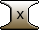
<style>
.page{position:relative;width:39px;height:30px;background:#ffffff}
.page>*{position:absolute;margin:0}
.t1{font:11px "Verdana";color:#000000}
</style>
<div class="page">
<p class="t1" style="left:16px;top:11px;width:8px;height:8px">X</p>
</div>
